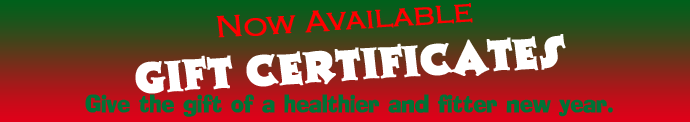
<style>
.page{position:relative;width:690px;height:122px}
.page>*{position:absolute;margin:0}
.t1{font:41.8px "Tristan";color:#ffffff;font-weight:bold}
.t2{font:31.3px "CopperplateGothic-Light";color:#ff0000;font-weight:bold}
.t3{font:25.1px "Socket";color:#007236;font-weight:bold;scale:0.92 1}
</style>
<div class="page">
<p class="t1" style="left:135px;top:3px;width:431px;height:91px;text-align:center;rotate:-4deg"><span class="t2">Now Available<br></span>Gift Certificates</p>
<p class="t3" style="left:85px;top:94px;width:528px;height:23px">Give the gift of a healthier and fitter new year.</p>
</div>
